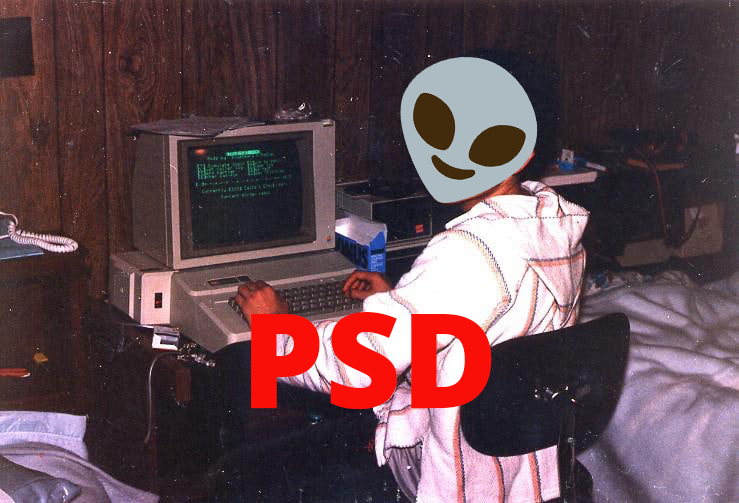
<style>
.page{position:relative;width:739px;height:503px}
.page>*{position:absolute;margin:0}
.t1{font:132.1px "OpenSans-Extrabold";color:#fa0e08}
</style>
<div class="page">
<p class="t1" style="left:251px;top:312px;width:241px;height:97px">PSD</p>
</div>
